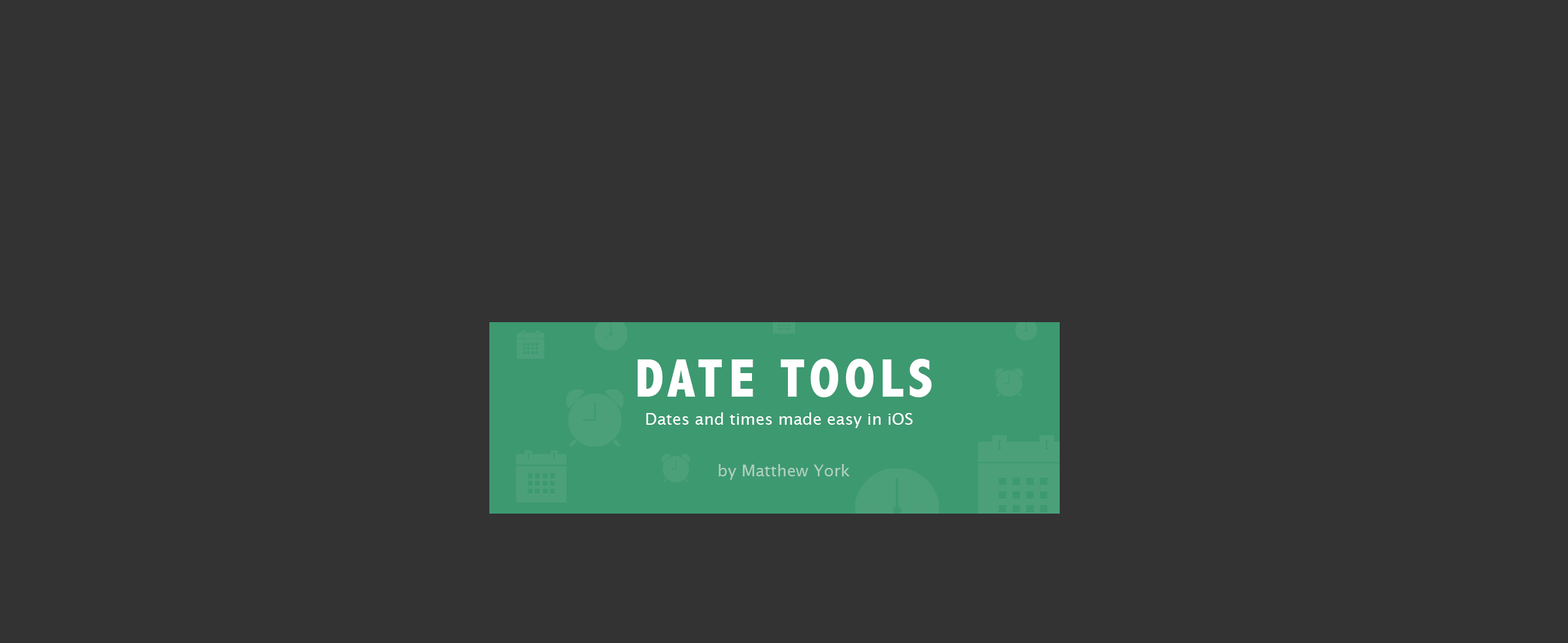
<style>
.page{position:relative;width:1568px;height:643px;background:#333333}
.page>*{position:absolute;margin:0}
.t1{font:54.4px "AbadiMT-CondensedExtraBold";letter-spacing:0.1em;color:#ffffff}
.t2{font:16.3px "LucidaSans";color:#ffffff}
.t3{font:16.3px "LucidaSans";color:#b0d0c0}
</style>
<div class="page">
<p class="t1" style="left:638px;top:359px;width:294px;height:38px">DATE TOOLS</p>
<p class="t2" style="left:646px;top:412px;width:267px;height:16px">Dates and times made easy in iOS</p>
<p class="t3" style="left:719px;top:464px;width:131px;height:16px">by Matthew York</p>
</div>
